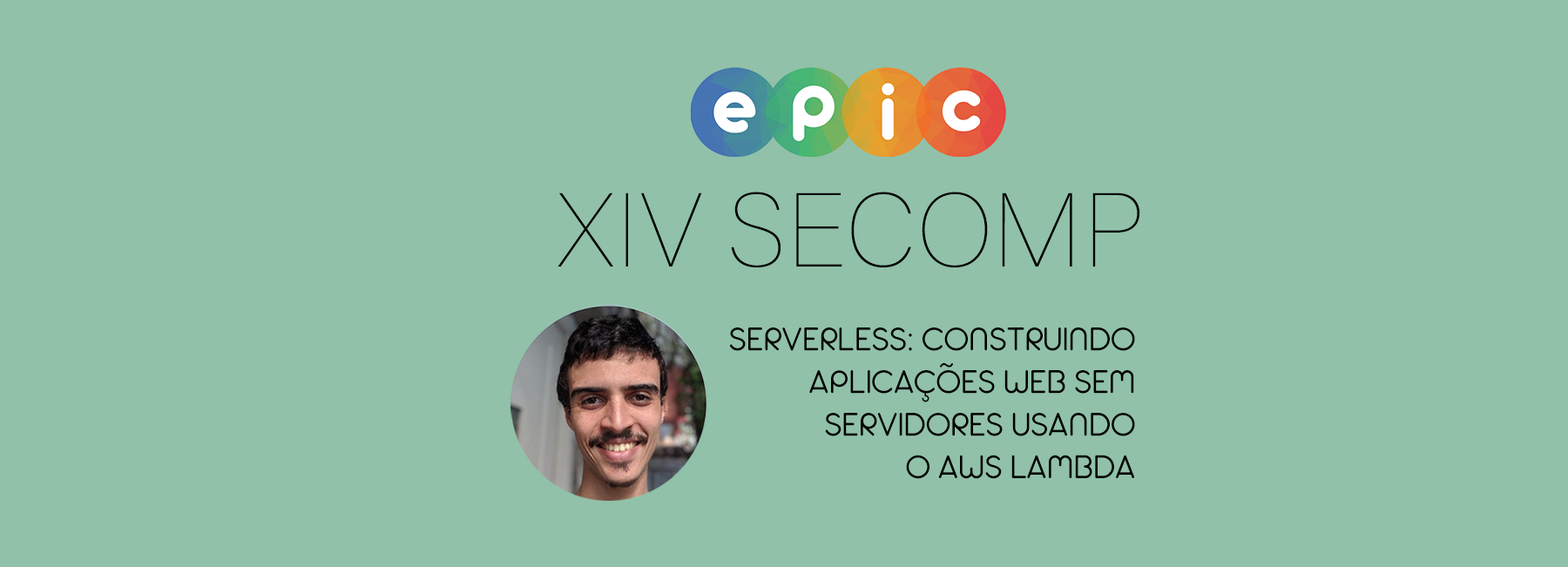
<style>
.page{position:relative;width:1568px;height:567px;background:#91c1a9}
.page>*{position:absolute;margin:0}
.t1{font:103.9px "AcuminConcept-Thin";color:#000000}
.t2{font:35.5px "AristaProAlternate-Light";color:#000000}
</style>
<div class="page">
<p class="t1" style="left:558px;top:192px;width:582px;height:75px">XIV SECOMP</p>
<p class="t2" style="left:730px;top:328px;width:405px;height:151px;text-align:right">SERVERLESS: CONSTRUINDO<br>APLICAÇÕES WEB SEM<br>SERVIDORES USANDO<br>O AWS LAMBDA</p>
</div>
